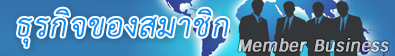
<style>
.page{position:relative;width:395px;height:56px}
.page>*{position:absolute;margin:0}
.t1{font:45px "THSarabunPSK";color:#0d90f4;font-weight:bold;font-style:italic}
.t2{font:24px "THKrub-Bold";color:#bfc0c0;font-weight:bold;font-style:italic}
</style>
<div class="page">
<p class="t1" style="left:18px;top:8px;width:211px;height:39px">ธุรกิจของสมาชิก</p>
<p class="t2" style="left:238px;top:38px;width:151px;height:14px">Member Business</p>
</div>
